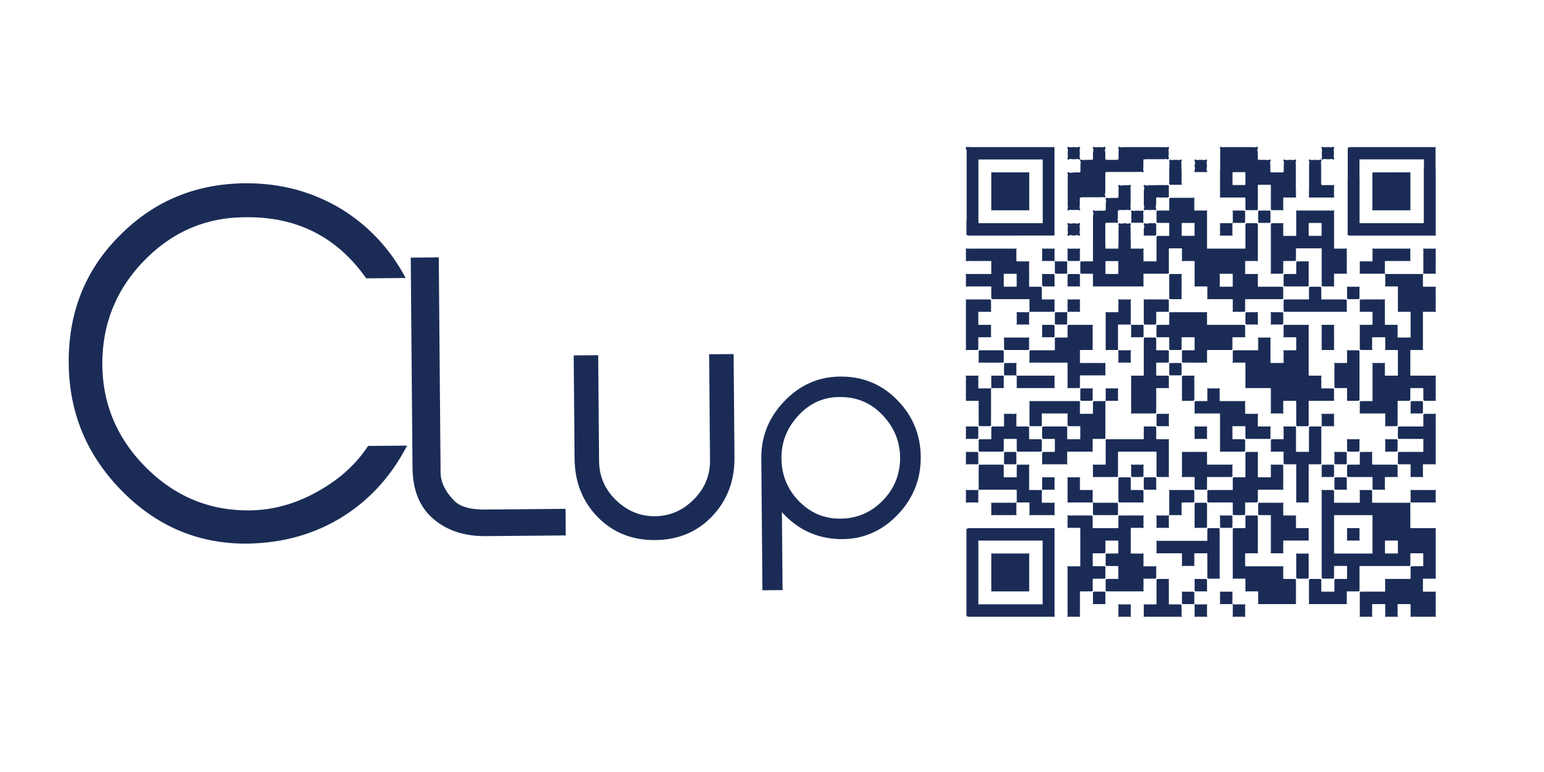
<style>
.page{position:relative;width:1544px;height:772px;background:#ffffff}
.page>*{position:absolute;margin:0}
.t1{font:453.2px "AbeatbyKai";color:#1a2c56}
.t2{font:362.6px "AbeatbyKai";color:#1a2c56}
.t3{font:317.3px "AbeatbyKai";color:#1a2c56}
.t4{font:271.9px "AbeatbyKai";color:#1a2c56}
</style>
<div class="page">
<p class="t1" style="left:68px;top:183px;width:853px;height:408px">C<span class="t2">L</span><span class="t3">u</span><span class="t4">p</span></p>
</div>
